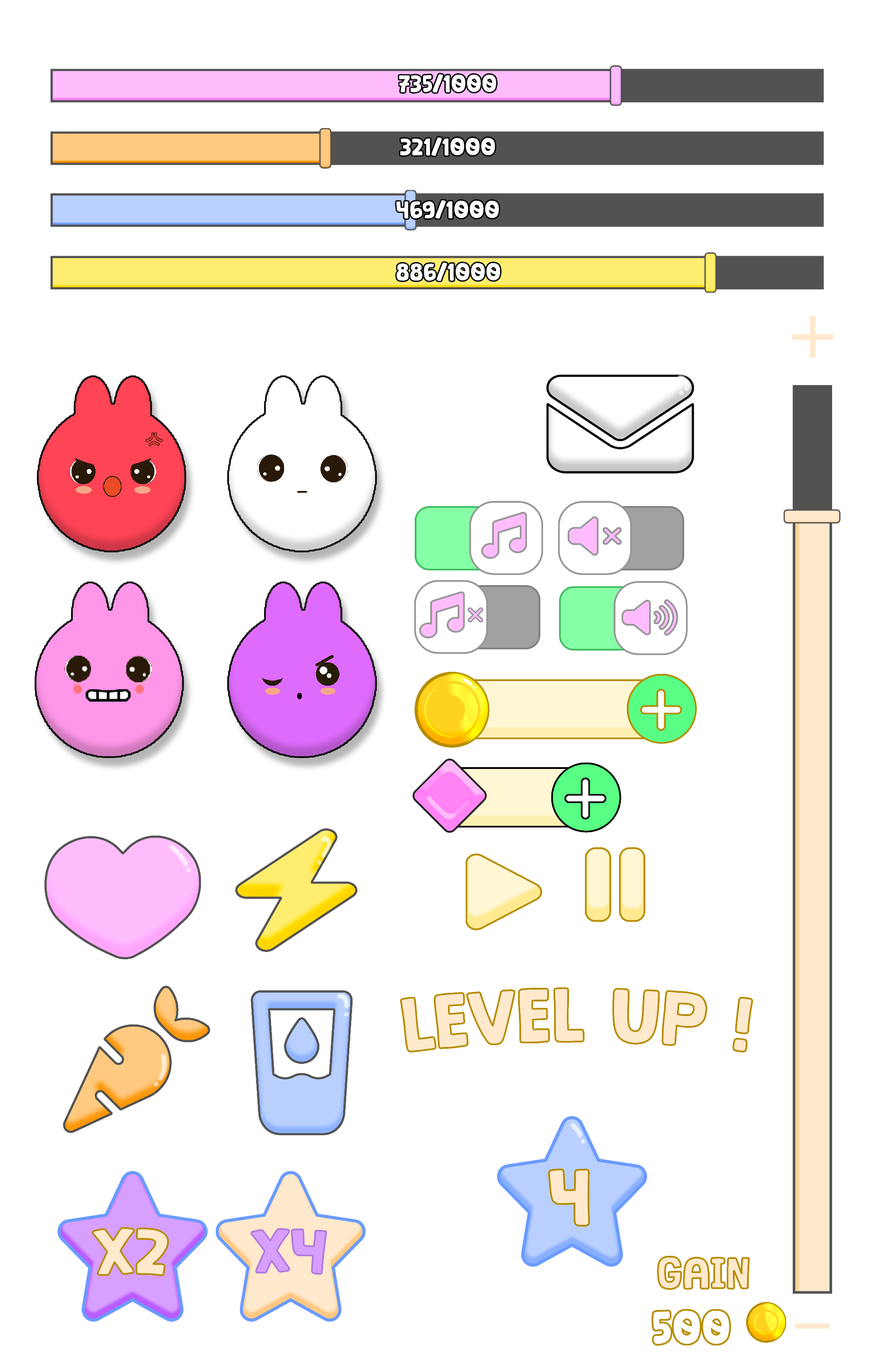
<style>
.page{position:relative;width:874px;height:1365px;background:#ffffff}
.page>*{position:absolute;margin:0}
.t1{font:22.6px "Toasty-Milk";color:#ffffff}
.t2{font:65.9px "DejaVuSans";color:#ffe9cd}
.t3{font:71.8px "Toasty-Milk";color:#ffe9cd}
.t4{font:61.2px "Toasty-Milk";color:#ffe9cd}
.t5{font:56.9px "Toasty-Milk";color:#d79fff}
.t6{font:43.1px "Toasty-Milk";color:#ffffff}
.t7{font:65.9px "DejaVuSans";color:#ffe9cd;scale:2 1}
</style>
<div class="page">
<p class="t1" style="left:399px;top:74px;width:97px;height:19px">735/1000</p>
<p class="t1" style="left:400px;top:137px;width:95px;height:19px">321/1000</p>
<p class="t1" style="left:396px;top:200px;width:103px;height:19px">469/1000</p>
<p class="t1" style="left:396px;top:263px;width:104px;height:18px">886/1000</p>
<p class="t2" style="left:791px;top:316px;width:42px;height:42px">+</p>
<p class="t3" style="left:550px;top:1170px;width:38px;height:55px">4</p>
<p class="t4" style="left:92px;top:1228px;width:76px;height:47px">X2</p>
<p class="t5" style="left:251px;top:1228px;width:75px;height:46px">X4</p>
<p class="t6" style="left:653px;top:1310px;width:76px;height:34px">500</p>
<p class="t7" style="left:794px;top:1323px;width:35px;height:6px">-</p>
</div>
